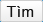
<style>
.page{position:relative;width:43px;height:22px}
.page>*{position:absolute;margin:0}
.t1{font:15px "VNI-Helve";letter-spacing:0.05em;color:#161616}
</style>
<div class="page">
<p class="t1" style="left:6px;top:6px;width:28px;height:11px">Tìm</p>
</div>
